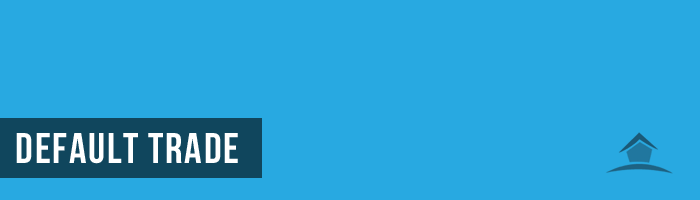
<style>
.page{position:relative;width:700px;height:200px;background:#28a9e1}
.page>*{position:absolute;margin:0}
.t1{font:43px "BebasNeue";letter-spacing:0.04em;color:#ffffff}
</style>
<div class="page">
<p class="t1" style="left:16px;top:133px;width:222px;height:31px">Default Trade</p>
</div>
